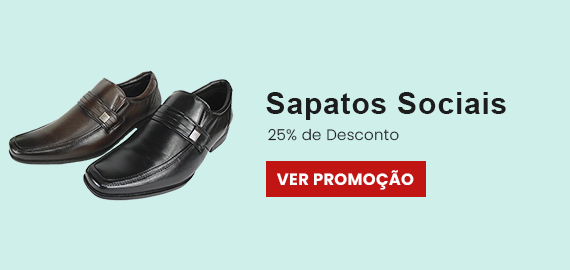
<style>
.page{position:relative;width:570px;height:270px;background:#cfefea}
.page>*{position:absolute;margin:0}
.t1{font:30.4px "Arial-BoldMT";letter-spacing:0.02em;color:#1c1c1c}
.t2{font:15px "Poppins-Light";letter-spacing:0.02em;color:#1c1c1c}
.t3{font:16.3px "Poppins-Bold";letter-spacing:0.02em;color:#fefefe}
</style>
<div class="page">
<p class="t1" style="left:266px;top:92px;width:240px;height:28px">Sapatos Sociais</p>
<p class="t2" style="left:268px;top:128px;width:131px;height:13px">25% de Desconto</p>
<p class="t3" style="left:277px;top:170px;width:137px;height:20px">VER PROMOÇÃO</p>
</div>
